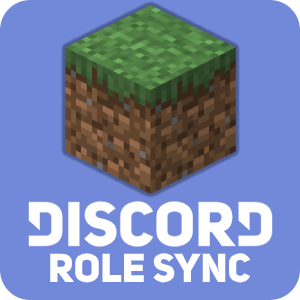
<style>
.page{position:relative;width:300px;height:300px;background:#7289da}
.page>*{position:absolute;margin:0}
.t1{font:40px "UniSansHeavyCAPS";color:#ffffff}
</style>
<div class="page">
<p class="t1" style="left:50px;top:253px;width:201px;height:30px">ROLE SYNC</p>
</div>
